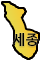
<style>
.page{position:relative;width:42px;height:62px;background:#ffffff}
.page>*{position:absolute;margin:0}
.t1{font:14px "HancomGothicBold";color:#000000}
</style>
<div class="page">
<p class="t1" style="left:12px;top:33px;width:27px;height:14px">세종</p>
</div>
